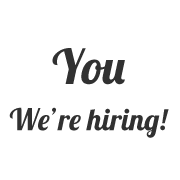
<style>
.page{position:relative;width:180px;height:180px;background:#ffffff}
.page>*{position:absolute;margin:0}
.t1{font:48px "Lobster1.4";color:#313131}
.t2{font:30px "Lobster1.4";color:#313131}
</style>
<div class="page">
<p class="t1" style="left:52px;top:48px;width:73px;height:37px">You</p>
<p class="t2" style="left:9px;top:107px;width:160px;height:31px">We’re hiring!</p>
</div>
